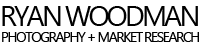
<style>
.page{position:relative;width:200px;height:45px;background:#ffffff}
.page>*{position:absolute;margin:0}
.t1{font:28px "MicrosoftTaiLe";letter-spacing:-0.1em;color:#000000}
.t2{font:14px "MicrosoftTaiLe";letter-spacing:-0.1em;color:#000000}
</style>
<div class="page">
<p class="t1" style="left:2px;top:6px;width:196px;height:20px">RYAN WOODMAN</p>
<p class="t2" style="left:2px;top:32px;width:197px;height:10px">PHOTOGRAPHY + MARKET RESEARCH</p>
</div>
